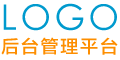
<style>
.page{position:relative;width:120px;height:60px;background:#ffffff}
.page>*{position:absolute;margin:0}
.t1{font:35px "STHeitiSC-Light";letter-spacing:0.1em;color:#009ace}
.t2{font:18px "FZLTZHK--GBK1-0";letter-spacing:0.1em;color:#fd8e00}
</style>
<div class="page">
<p class="t1" style="left:3px;top:3px;width:114px;height:28px">LOGO</p>
<p class="t2" style="left:1px;top:37px;width:117px;height:18px">后台管理平台</p>
</div>
